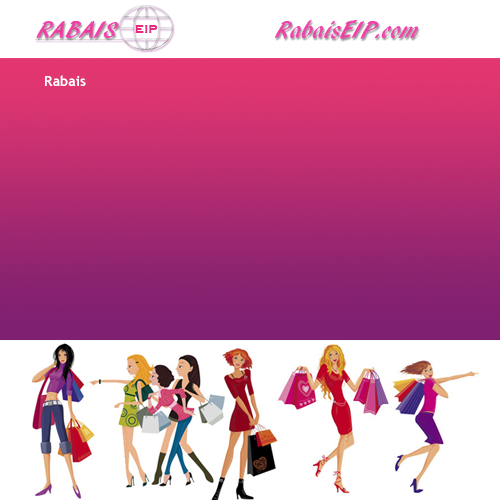
<style>
.page{position:relative;width:500px;height:500px;background:#ffffff}
.page>*{position:absolute;margin:0}
.t1{font:25.2px "ARBLANCA";color:#ee45aa}
.t2{font:12.4px "CopperplateGothic-Bold";color:#e42b7d}
.t3{font:25.2px "ARBLANCA";color:#ef47ad}
.t4{font:14px "TrebuchetMS-Bold";color:#ffffff}
</style>
<div class="page">
<p class="t1" style="left:36px;top:21px;width:83px;height:18px">RABAIS</p>
<p class="t2" style="left:135px;top:25px;width:23px;height:8px">EIP</p>
<p class="t3" style="left:275px;top:20px;width:144px;height:19px">RabaisEIP.com</p>
<p class="t4" style="left:45px;top:75px;width:41px;height:11px">Rabais</p>
</div>
